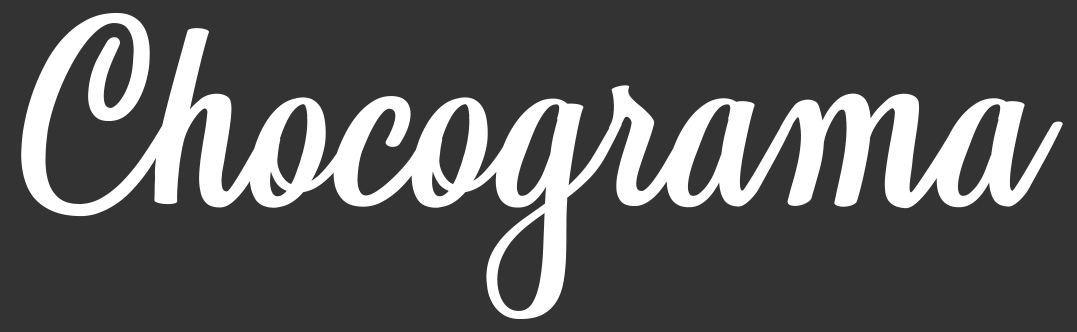
<style>
.page{position:relative;width:1077px;height:332px;background:#333333}
.page>*{position:absolute;margin:0}
.t1{font:228px "HoneymoonPersonalUse";color:#ffffff}
</style>
<div class="page">
<p class="t1" style="left:21px;top:12px;width:1042px;height:307px">Chocograma</p>
</div>
